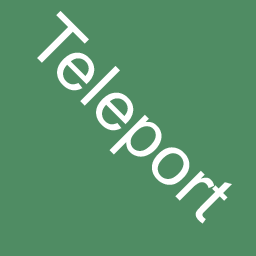
<style>
.page{position:relative;width:256px;height:256px;background:#4f8c63}
.page>*{position:absolute;margin:0}
.t1{font:69.6px "ArialMT";color:#ffffff}
</style>
<div class="page">
<p class="t1" style="left:37px;top:11px;width:195px;height:213px;rotate:45deg">Teleport</p>
</div>
